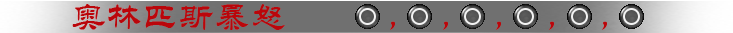
<style>
.page{position:relative;width:733px;height:33px;background:#707070}
.page>*{position:absolute;margin:0}
.t1{font:36px "STLiti";color:#ba060b}
</style>
<div class="page">
<p class="t1" style="left:72px;top:4px;width:535px;height:26px">奥林匹斯暴怒           ，    ，    ，    ，    ，</p>
</div>
